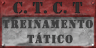
<style>
.page{position:relative;width:96px;height:48px}
.page>*{position:absolute;margin:0}
.t1{font:16.7px "Army";color:#303030;text-transform:uppercase}
.t2{font:12.4px/14.7px "Army";letter-spacing:0.08em;color:#3f3f3f;text-transform:uppercase;font-weight:bold;scale:0.92 1}
</style>
<div class="page">
<p class="t1" style="left:13px;top:1px;width:70px;height:13px">c. t. c. t</p>
<p class="t2" style="left:2px;top:19px;width:91px;height:25px;text-align:center">treinamento <br>tático</p>
</div>
